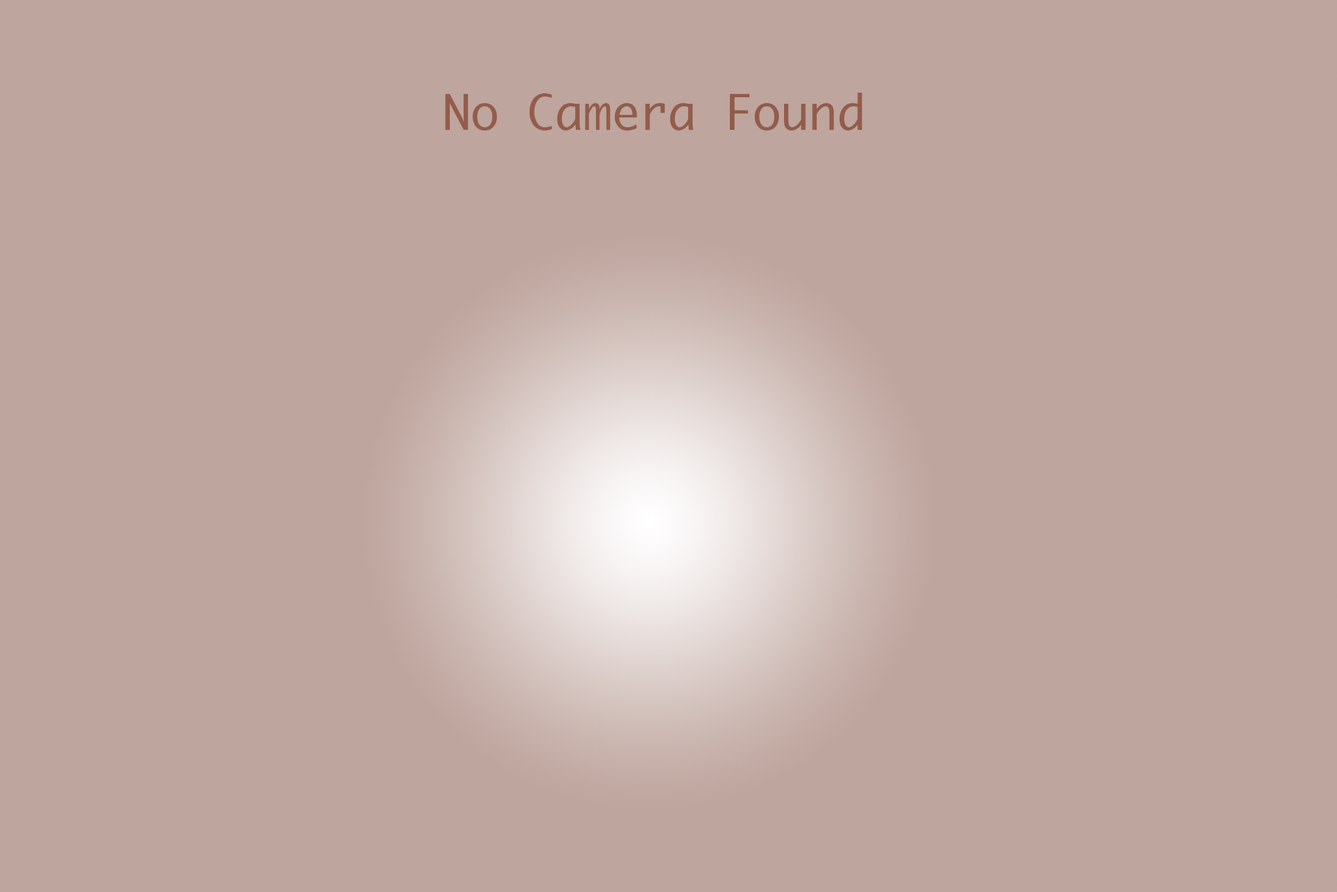
<style>
.page{position:relative;width:1337px;height:892px;background:#bea59d}
.page>*{position:absolute;margin:0}
.t1{font:47px "Monaco";color:#935c4a}
</style>
<div class="page">
<p class="t1" style="left:445px;top:93px;width:417px;height:38px">No Camera Found</p>
</div>
